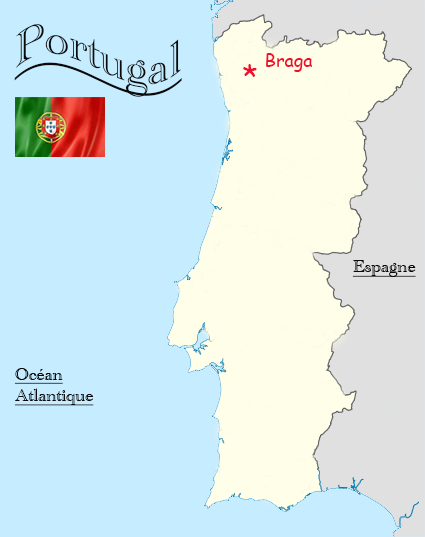
<style>
.page{position:relative;width:425px;height:537px;background:#c6ecff}
.page>*{position:absolute;margin:0}
.t1{font:48px "AcademyEngravedLetPlain";color:#0a0908;text-decoration:underline}
.t2{font:18px "ComicSansMS";color:#f20c2d}
.t3{font:30px "ComicSansMS";color:#f20c2d}
.t4{font:18px "AcademyEngravedLetPlain";color:#0a0908;text-decoration:underline}
</style>
<div class="page">
<p class="t1" style="left:14px;top:24px;width:168px;height:73px">Portugal</p>
<p class="t2" style="left:266px;top:53px;width:47px;height:19px">Braga</p>
<p class="t3" style="left:243px;top:64px;width:14px;height:13px">*</p>
<p class="t4" style="left:352px;top:260px;width:64px;height:17px">Espagne</p>
<p class="t4" style="left:14px;top:368px;width:80px;height:38px">Océan<br>Atlantique</p>
</div>
